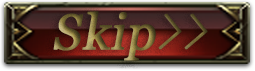
<style>
.page{position:relative;width:255px;height:71px}
.page>*{position:absolute;margin:0}
.t1{font:50px "Georgia";font-weight:bold;font-style:italic}
.t2{font:50px "SimSun";font-weight:bold;font-style:italic}
</style>
<div class="page">
<p class="t1" style="left:53px;top:11px;width:155px;height:50px">Skip<span class="t2">&gt;&gt;</span></p>
</div>
